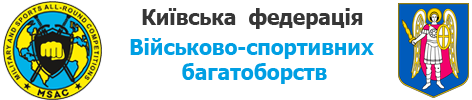
<style>
.page{position:relative;width:472px;height:100px;background:#ffffff}
.page>*{position:absolute;margin:0}
.t1{font:20.8px "Tahoma-Bold";color:#363636}
.t2{font:20.8px "Tahoma-Bold";color:#009fe3}
</style>
<div class="page">
<p class="t1" style="left:142px;top:8px;width:221px;height:21px">Київська  федерація</p>
<p class="t2" style="left:130px;top:38px;width:244px;height:46px;text-align:center">Військово-спортивних <br>багатоборств</p>
</div>
